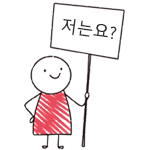
<style>
.page{position:relative;width:150px;height:150px;background:#ffffff}
.page>*{position:absolute;margin:0}
.t1{font:16.9px "MalgunGothic";color:#333333;scale:0.96 1}
</style>
<div class="page">
<p class="t1" style="left:61px;top:19px;width:56px;height:20px;rotate:8deg">저는요?</p>
</div>
